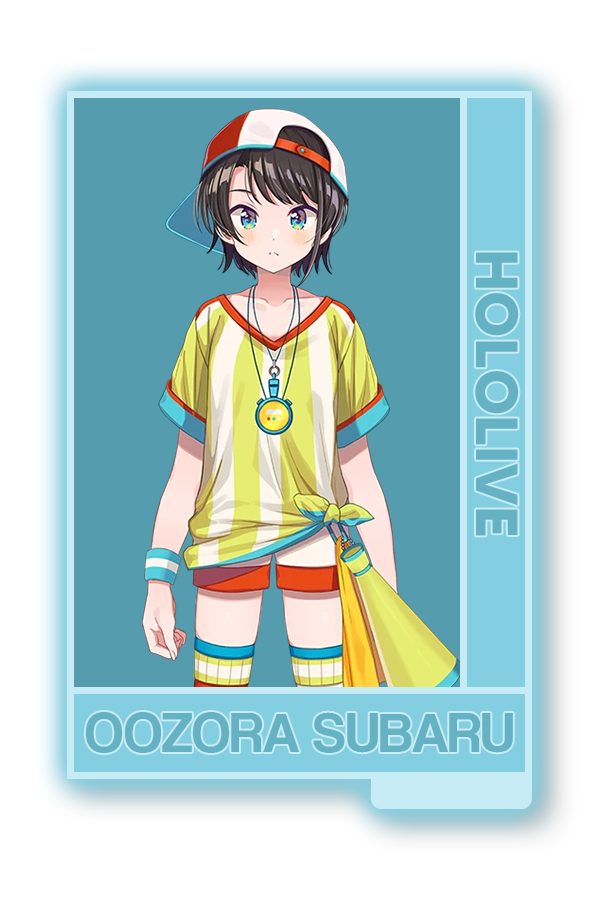
<style>
.page{position:relative;width:600px;height:900px;background:#549cae}
.page>*{position:absolute;margin:0}
.t1{font:59.2px "MADETOMMY-Bold";color:#66b2c5}
.t2{font:56.9px "CoolveticaRg-Regular";color:#66b2c5}
</style>
<div class="page">
<p class="t1" style="left:475px;top:252px;width:44px;height:284px;rotate:90deg">HOLOLIVE</p>
<p class="t2" style="left:85px;top:712px;width:428px;height:41px">OOZORA SUBARU</p>
</div>
